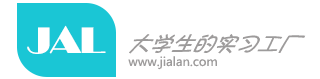
<style>
.page{position:relative;width:320px;height:79px;background:#ffffff}
.page>*{position:absolute;margin:0}
.t1{font:36px "BroadwayBT-Regular";color:#ffffff}
.t2{font:24px "AaPangXiaoer";color:#9d9b9b;scale:0.89 1}
.t3{font:12px "MicrosoftYaHei";color:#9d9b9b}
</style>
<div class="page">
<p class="t1" style="left:27px;top:25px;width:79px;height:29px">JAL</p>
<p class="t2" style="left:129px;top:34px;width:177px;height:20px">大学生的实习工厂</p>
<p class="t3" style="left:128px;top:56px;width:89px;height:14px">www.jialan.com</p>
</div>
